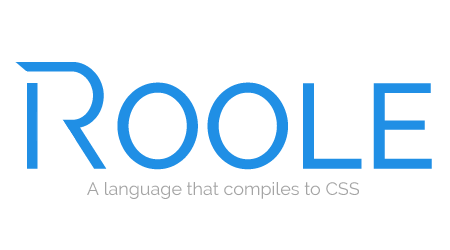
<style>
.page{position:relative;width:450px;height:250px;background:#ffffff}
.page>*{position:absolute;margin:0}
.t1{font:120px "Raleway-Medium";color:#208fe5}
.t2{font:150px "Raleway";color:#208fe5}
.t3{font:18px "Raleway";color:#a4a4a4}
</style>
<div class="page">
<p class="t1" style="left:27px;top:62px;width:405px;height:108px"><span class="t2">R</span>OOLE</p>
<p class="t3" style="left:87px;top:182px;width:272px;height:17px">A language that compiles to CSS</p>
</div>
